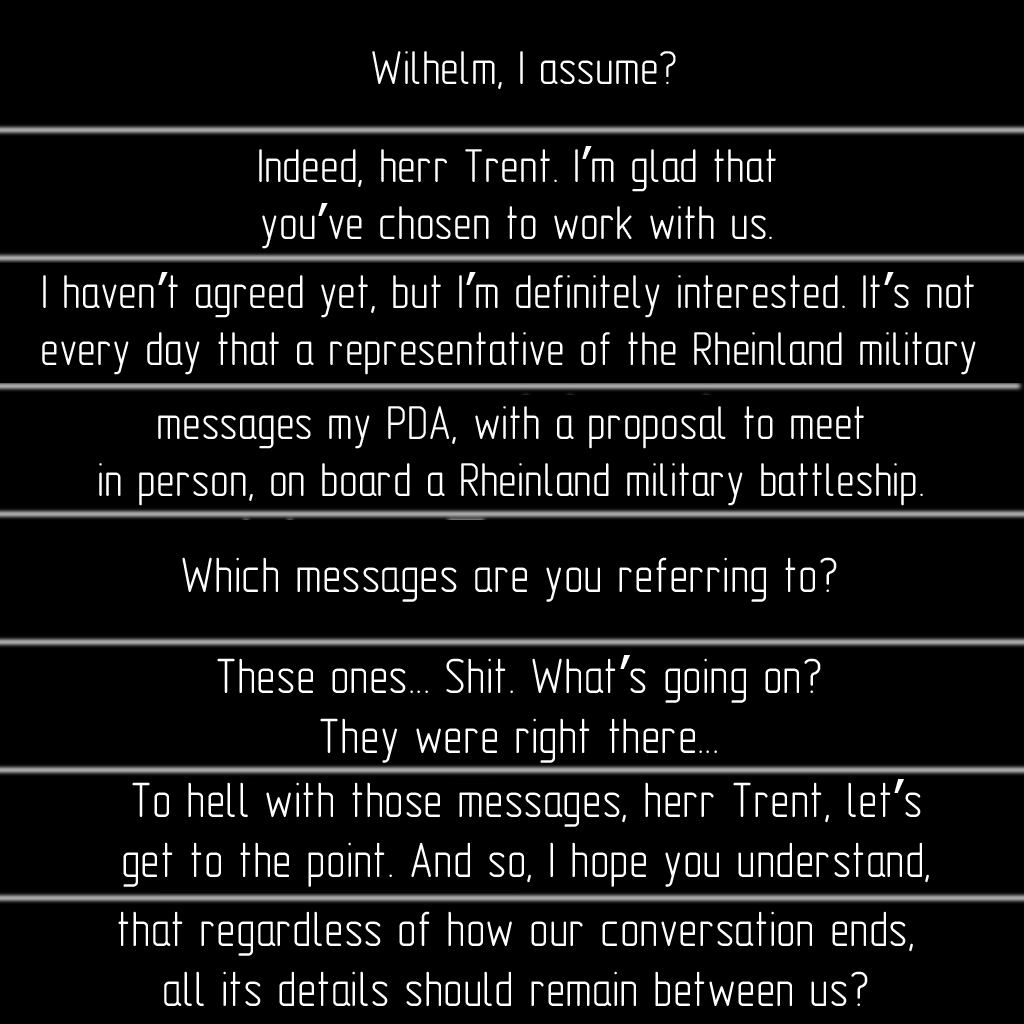
<style>
.page{position:relative;width:1024px;height:1024px;background:#000000}
.page>*{position:absolute;margin:0}
.t1{font:48px "GOST-2.304-81typeA";color:#ffffff}
.t2{font:48px "Tahoma";color:#ffffff}
.t3{font:50px "GOST-2.304-81typeA";color:#ffffff}
.t4{font:50px "Tahoma";color:#ffffff}
</style>
<div class="page">
<p class="t1" style="left:372px;top:51px;width:304px;height:38px">Wilhelm, I assume?</p>
<p class="t1" style="left:259px;top:146px;width:517px;height:103px;text-align:center">Indeed, herr Trent. I<span class="t2">’</span>m glad that<br>you<span class="t2">’</span>ve chosen to work with us.</p>
<p class="t1" style="left:42px;top:272px;width:934px;height:103px;text-align:center">I haven<span class="t2">’</span>t agreed yet, but I<span class="t2">’</span>m definitely interested. It<span class="t2">’</span>s not<br>every day that a representative of the Rheinland military</p>
<p class="t1" style="left:99px;top:406px;width:824px;height:100px;text-align:center">messages my PDA, with a proposal to meet<br>in person, on board a Rheinland military battleship.</p>
<p class="t3" style="left:182px;top:557px;width:655px;height:45px">Which messages are you referring to?</p>
<p class="t3" style="left:217px;top:655px;width:604px;height:108px;text-align:center">These ones... Shit. What<span class="t4">’</span>s going on?<br>They were right there...</p>
<p class="t3" style="left:123px;top:779px;width:806px;height:108px;text-align:center">To hell with those messages, herr Trent, let<span class="t4">’</span>s<br>get to the point. And so, I hope you understand,</p>
<p class="t3" style="left:118px;top:911px;width:795px;height:95px;text-align:center">that regardless of how our conversation ends,<br>all its details should remain between us?</p>
</div>
